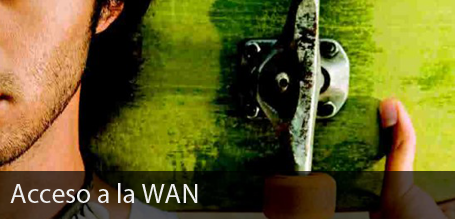
<style>
.page{position:relative;width:455px;height:219px}
.page>*{position:absolute;margin:0}
.t1{font:27.4px "MyriadPro-Regular";color:#eeeeee}
</style>
<div class="page">
<p class="t1" style="left:10px;top:183px;width:188px;height:20px">Acceso a la WAN</p>
</div>
